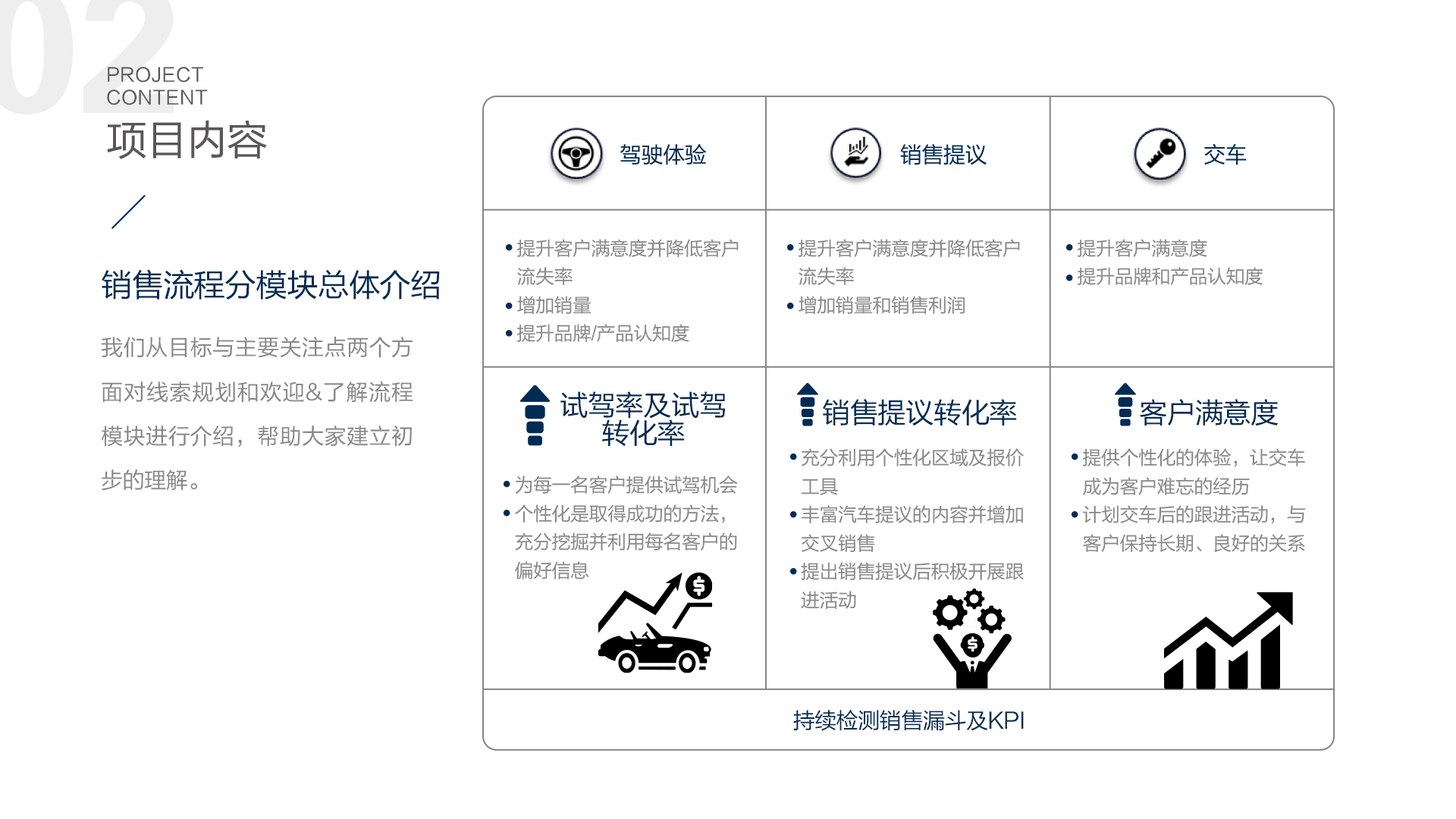
<style>
.page{position:relative;width:1456px;height:819px;background:#ffffff}
.page>*{position:absolute;margin:0}
.t1{font:18.8px "FZLTHJW--GB1-0";letter-spacing:0.02em;color:#595757}
.t2{font:41.1px "FZLTHJW--GB1-0";letter-spacing:-0.02em;color:#595757}
.t3{font:19px/28.4px "FZLTHJW--GB1-0";letter-spacing:-0.02em;color:#888888}
.t4{font:31.6px "FZLTHJW--GB1-0";letter-spacing:-0.02em;color:#002c54}
.t5{font:22.1px/44.2px "FZLTHJW--GB1-0";letter-spacing:-0.02em;color:#888888}
.t6{font:28.4px/28.4px "FZLTHJW--GB1-0";letter-spacing:-0.02em;color:#002c54}
.t7{font:28.4px "FZLTHJW--GB1-0";letter-spacing:-0.02em;color:#002c54}
.t8{font:22.1px "FZLTHJW--GB1-0";letter-spacing:-0.02em;color:#002c54}
</style>
<div class="page">
<p class="t1" style="left:107px;top:67px;width:101px;height:38px">PROJECT <br>CONTENT</p>
<p class="t2" style="left:107px;top:120px;width:160px;height:39px">项目内容</p>
<p class="t3" style="left:517px;top:239px;width:222px;height:103px">提升客户满意度并降低客户<br>流失率<br>增加销量 <br>提升品牌/产品认知度</p>
<p class="t3" style="left:799px;top:239px;width:221px;height:76px">提升客户满意度并降低客户<br>流失率<br>增加销量和销售利润</p>
<p class="t3" style="left:1078px;top:239px;width:185px;height:46px">提升客户满意度<br>提升品牌和产品认知度</p>
<p class="t4" style="left:102px;top:269px;width:338px;height:31px">销售流程分模块总体介绍</p>
<p class="t5" style="left:101px;top:337px;width:312px;height:154px;text-align:justify">我们从目标与主要关注点两个方面对线索规划和欢迎&amp;了解流程模块进行介绍，帮助大家建立初步的理解。</p>
<p class="t6" style="left:560px;top:391px;width:165px;height:56px;text-align:center">试驾率及试驾<br>转化率</p>
<p class="t7" style="left:823px;top:399px;width:194px;height:27px">销售提议转化率</p>
<p class="t7" style="left:1140px;top:399px;width:138px;height:27px">客户满意度</p>
<p class="t3" style="left:801px;top:448px;width:223px;height:162px">充分利用个性化区域及报价<br>工具<br>丰富汽车提议的内容并增加<br>交叉销售<br>提出销售提议后积极开展跟<br>进活动</p>
<p class="t3" style="left:1083px;top:448px;width:223px;height:104px">提供个性化的体验，让交车<br>成为客户难忘的经历<br>计划交车后的跟进活动，与<br>客户保持长期、良好的关系</p>
<p class="t3" style="left:515px;top:475px;width:223px;height:104px">为每一名客户提供试驾机会<br>个性化是取得成功的方法，<br>充分挖掘并利用每名客户的<br>偏好信息</p>
<p class="t8" style="left:793px;top:710px;width:231px;height:21px">持续检测销售漏斗及KPI</p>
</div>
